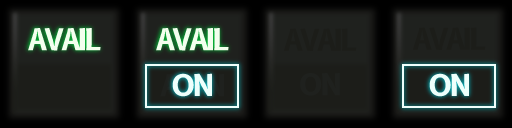
<style>
.page{position:relative;width:512px;height:128px}
.page>*{position:absolute;margin:0}
.t1{font:29.2px "B612-Bold";letter-spacing:-0.075em;color:#1c1d19}
.t2{font:29.2px "B612-Bold";letter-spacing:-0.075em;color:#1f211e}
</style>
<div class="page">
<p class="t1" style="left:283px;top:28px;width:74px;height:23px">AVAIL</p>
<p class="t1" style="left:412px;top:27px;width:74px;height:23px">AVAIL</p>
<p class="t2" style="left:300px;top:73px;width:40px;height:23px">ON</p>
</div>
